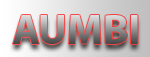
<style>
.page{position:relative;width:150px;height:57px}
.page>*{position:absolute;margin:0}
.t1{font:42.4px "MyriadPro-Bold"}
</style>
<div class="page">
<p class="t1" style="left:13px;top:15px;width:125px;height:29px">AUMBI</p>
</div>
